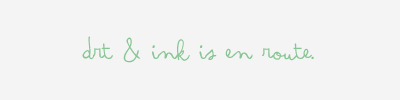
<style>
.page{position:relative;width:400px;height:100px;background:#f4f4f4}
.page>*{position:absolute;margin:0}
.t1{font:41px "ArsenaleWhite";color:#87c693}
</style>
<div class="page">
<p class="t1" style="left:82px;top:36px;width:232px;height:27px">drt &amp; ink is en route.</p>
</div>
